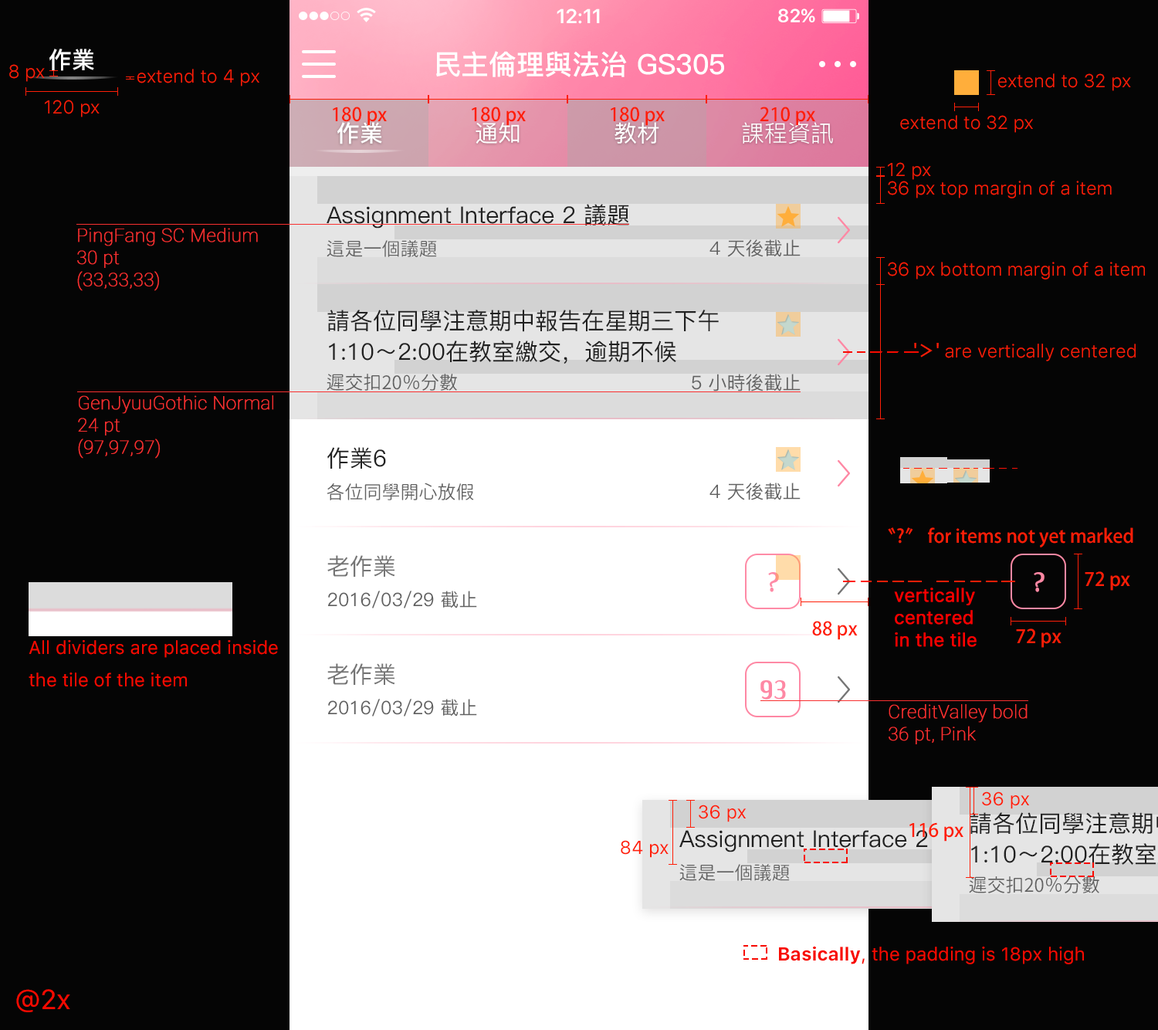
<style>
.page{position:relative;width:1158px;height:1030px;background:#050505}
.page>*{position:absolute;margin:0}
.t1{font:20.1px "SFUIDisplay-Semibold";color:#ffffff}
.t2{font:18.5px "SFUIDisplay-Semibold";letter-spacing:0.025em;color:#ffffff}
.t3{font:23.2px "PingFang-SC-Bold";color:#ffffff}
.t4{font:27.8px "PingFang-SC-Bold";color:#ffffff}
.t5{font:18.5px "SFUIText-Light";color:#ff1e07}
.t6{font:18.5px "AdobeFanHeitiStd-Bold";color:#ff1e07}
.t7{font:23.2px "PingFang-SC-Medium";color:#ffffff}
.t8{font:23.2px "PingFang-SC-Regular";color:#ffffff}
.t9{font:23.2px "PingFang-SC-Medium";color:#212121}
.t10{font:18.5px "Roboto-Thin";color:#f83030;font-weight:bold}
.t11{font:18.5px "GenJyuuGothic-Normal";color:#616161}
.t12{font:18.5px "PingFang-SC-Medium";color:#616161}
.t13{font:23.2px/30.9px "PingFang-SC-Medium";color:#212121}
.t14{font:23.2px "PingFang-SC-Medium";color:#757575}
.t15{font:27.8px "CreditValley-bold";color:#fe88a4}
.t16{font:18.5px "SFUIText-Regular";color:#ff0000;font-weight:bold}
.t17{font:18.5px "SFUIText-Regular";color:#f80a00}
.t18{font:18.5px "SFUIText-Regular";color:#ff1e07}
.t19{font:18.5px "SFUIText-Bold";color:#f80a00}
.t20{font:27.8px "SFUIText-Regular";color:#f80a00}
</style>
<div class="page">
<p class="t1" style="left:557px;top:8px;width:43px;height:16px">12:11</p>
<p class="t2" style="left:778px;top:8px;width:37px;height:14px">82%</p>
<p class="t3" style="left:49px;top:49px;width:45px;height:22px">作業</p>
<p class="t4" style="left:436px;top:51px;width:288px;height:26px">民主倫理與法治 GS305</p>
<p class="t5" style="left:9px;top:64px;width:36px;height:18px">8 px</p>
<p class="t5" style="left:137px;top:69px;width:122px;height:17px">extend to 4 px</p>
<p class="t5" style="left:998px;top:73px;width:133px;height:18px">extend to 32 px</p>
<p class="t5" style="left:45px;top:100px;width:55px;height:17px">120 px</p>
<p class="t6" style="left:333px;top:107px;width:54px;height:19px">180 px</p>
<p class="t6" style="left:472px;top:107px;width:54px;height:19px">180 px</p>
<p class="t6" style="left:611px;top:107px;width:54px;height:19px">180 px</p>
<p class="t6" style="left:760px;top:107px;width:55px;height:19px">210 px</p>
<p class="t3" style="left:337px;top:122px;width:45px;height:22px">作業</p>
<p class="t7" style="left:476px;top:122px;width:44px;height:22px">通知</p>
<p class="t7" style="left:614px;top:122px;width:45px;height:22px">教材</p>
<p class="t8" style="left:742px;top:122px;width:91px;height:22px">課程資訊</p>
<p class="t5" style="left:900px;top:115px;width:133px;height:18px">extend to 32 px</p>
<p class="t5" style="left:888px;top:162px;width:43px;height:18px">12 px</p>
<p class="t5" style="left:888px;top:181px;width:224px;height:17px">36 px top margin of a item</p>
<p class="t9" style="left:327px;top:204px;width:302px;height:24px">Assignment Interface 2 議題</p>
<p class="t10" style="left:77px;top:228px;width:181px;height:63px">PingFang SC Medium<br>30 pt<br>(33,33,33)</p>
<p class="t11" style="left:327px;top:240px;width:110px;height:17px">這是一個議題</p>
<p class="t12" style="left:709px;top:239px;width:92px;height:18px">4 天後截止</p>
<p class="t5" style="left:888px;top:262px;width:257px;height:17px">36 px bottom margin of a item</p>
<p class="t13" style="left:327px;top:310px;width:392px;height:54px">請各位同學注意期中報告在星期三下午1:10～2:00在教室繳交，逾期不候</p>
<p class="t5" style="left:914px;top:343px;width:222px;height:18px"><span class="t6">'＞'</span> are vertically centered</p>
<p class="t11" style="left:327px;top:374px;width:130px;height:17px">遲交扣20％分數</p>
<p class="t12" style="left:692px;top:374px;width:109px;height:17px">5 小時後截止</p>
<p class="t10" style="left:78px;top:395px;width:195px;height:64px">GenJyuuGothic Normal<br>24 pt<br>(97,97,97)</p>
<p class="t9" style="left:327px;top:447px;width:59px;height:22px">作業6</p>
<p class="t11" style="left:327px;top:482px;width:147px;height:18px">各位同學開心放假</p>
<p class="t12" style="left:709px;top:482px;width:92px;height:18px">4 天後截止</p>
<p class="t6" style="left:888px;top:527px;width:245px;height:20px">〝?〞 for items not yet marked</p>
<p class="t14" style="left:327px;top:555px;width:68px;height:22px">老作業</p>
<p class="t15" style="left:768px;top:572px;width:11px;height:20px">?</p>
<p class="t15" style="left:1034px;top:572px;width:10px;height:20px">?</p>
<p class="t6" style="left:1085px;top:571px;width:45px;height:20px">72 px</p>
<p class="t12" style="left:328px;top:591px;width:149px;height:17px">2016/03/29 截止</p>
<p class="t16" style="left:894px;top:587px;width:83px;height:60px">vertically<br>centered<br>in the tile</p>
<p class="t6" style="left:812px;top:621px;width:46px;height:19px">88 px</p>
<p class="t6" style="left:1016px;top:628px;width:45px;height:20px">72 px</p>
<p class="t17" style="left:29px;top:640px;width:249px;height:47px">All dividers are placed inside<br>the tile of the item</p>
<p class="t14" style="left:327px;top:663px;width:68px;height:22px">老作業</p>
<p class="t15" style="left:760px;top:680px;width:26px;height:19px">93</p>
<p class="t12" style="left:328px;top:699px;width:149px;height:17px">2016/03/29 截止</p>
<p class="t10" style="left:889px;top:704px;width:138px;height:40px">CreditValley bold<br>36 pt, Pink</p>
<p class="t18" style="left:982px;top:791px;width:48px;height:18px">36 px</p>
<p class="t18" style="left:699px;top:804px;width:47px;height:18px">36 px</p>
<p class="t6" style="left:909px;top:822px;width:54px;height:19px">116 px</p>
<p class="t18" style="left:621px;top:840px;width:48px;height:18px">84 px</p>
<p class="t17" style="left:779px;top:946px;width:305px;height:18px"><span class="t19">Basically</span>, the padding is 18px high</p>
<p class="t20" style="left:16px;top:989px;width:54px;height:23px">@2x</p>
</div>
